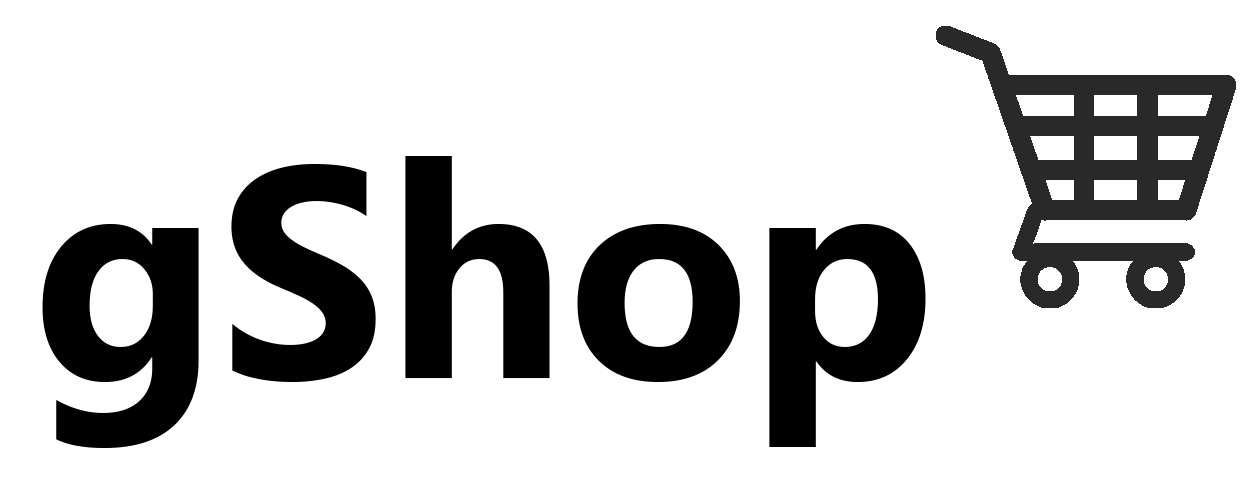
<style>
.page{position:relative;width:1252px;height:478px;background:#ffffff}
.page>*{position:absolute;margin:0}
.t1{font:300px "MicrosoftNewTaiLue-Bold";color:#000000}
</style>
<div class="page">
<p class="t1" style="left:42px;top:156px;width:884px;height:292px">gShop</p>
</div>
